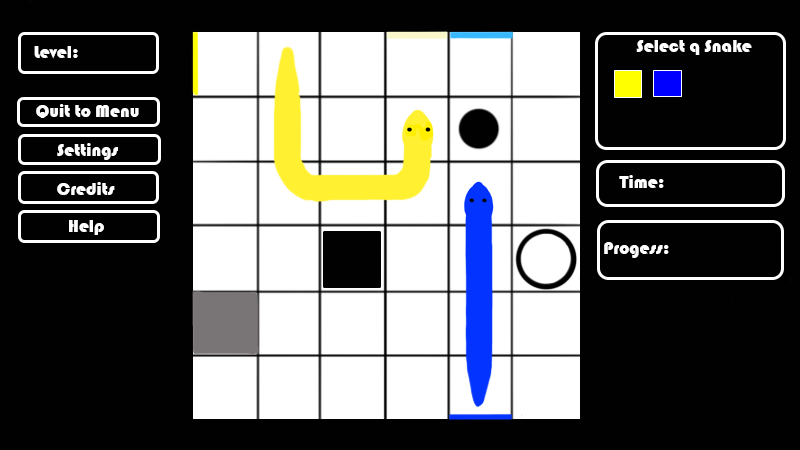
<style>
.page{position:relative;width:800px;height:450px;background:#010101}
.page>*{position:absolute;margin:0}
.t1{font:18px "Bauhaus93";color:#ffffff}
</style>
<div class="page">
<p class="t1" style="left:636px;top:40px;width:116px;height:15px">Select q Snake</p>
<p class="t1" style="left:34px;top:46px;width:44px;height:13px">Level:</p>
<p class="t1" style="left:36px;top:104px;width:103px;height:14px">Quit to Menu</p>
<p class="t1" style="left:57px;top:143px;width:61px;height:17px">Settings</p>
<p class="t1" style="left:57px;top:182px;width:58px;height:13px">Credits</p>
<p class="t1" style="left:619px;top:175px;width:45px;height:13px">Time:</p>
<p class="t1" style="left:69px;top:220px;width:35px;height:15px">Help</p>
<p class="t1" style="left:604px;top:242px;width:65px;height:16px">Progess:</p>
</div>
